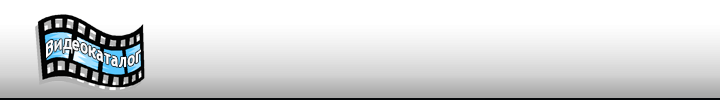
<style>
.page{position:relative;width:720px;height:100px;background:#ffffff}
.page>*{position:absolute;margin:0}
.t1{font:19.8px "TrebuchetMS-Bold";color:#fdfefe;scale:0.73 1}
</style>
<div class="page">
<p class="t1" style="left:46px;top:38px;width:95px;height:30px">Видеокаталог</p>
</div>
